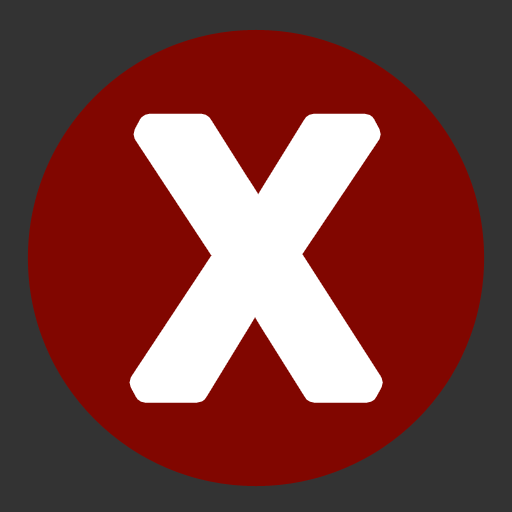
<style>
.page{position:relative;width:512px;height:512px;background:#810600}
.page>*{position:absolute;margin:0}
.t1{font:527.8px "MyriadPro-Regular";color:#ffffff;font-weight:bold;scale:0.95 1}
</style>
<div class="page">
<p class="t1" style="left:139px;top:123px;width:234px;height:270px">x</p>
</div>
